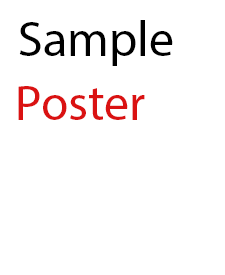
<style>
.page{position:relative;width:225px;height:275px;background:#ffffff}
.page>*{position:absolute;margin:0}
.t1{font:50px "MyriadPro-Regular";color:#000000}
.t2{font:50px "MyriadPro-Regular";color:#da1212}
</style>
<div class="page">
<p class="t1" style="left:19px;top:20px;width:154px;height:46px">Sample</p>
<p class="t2" style="left:18px;top:86px;width:127px;height:34px">Poster</p>
</div>
